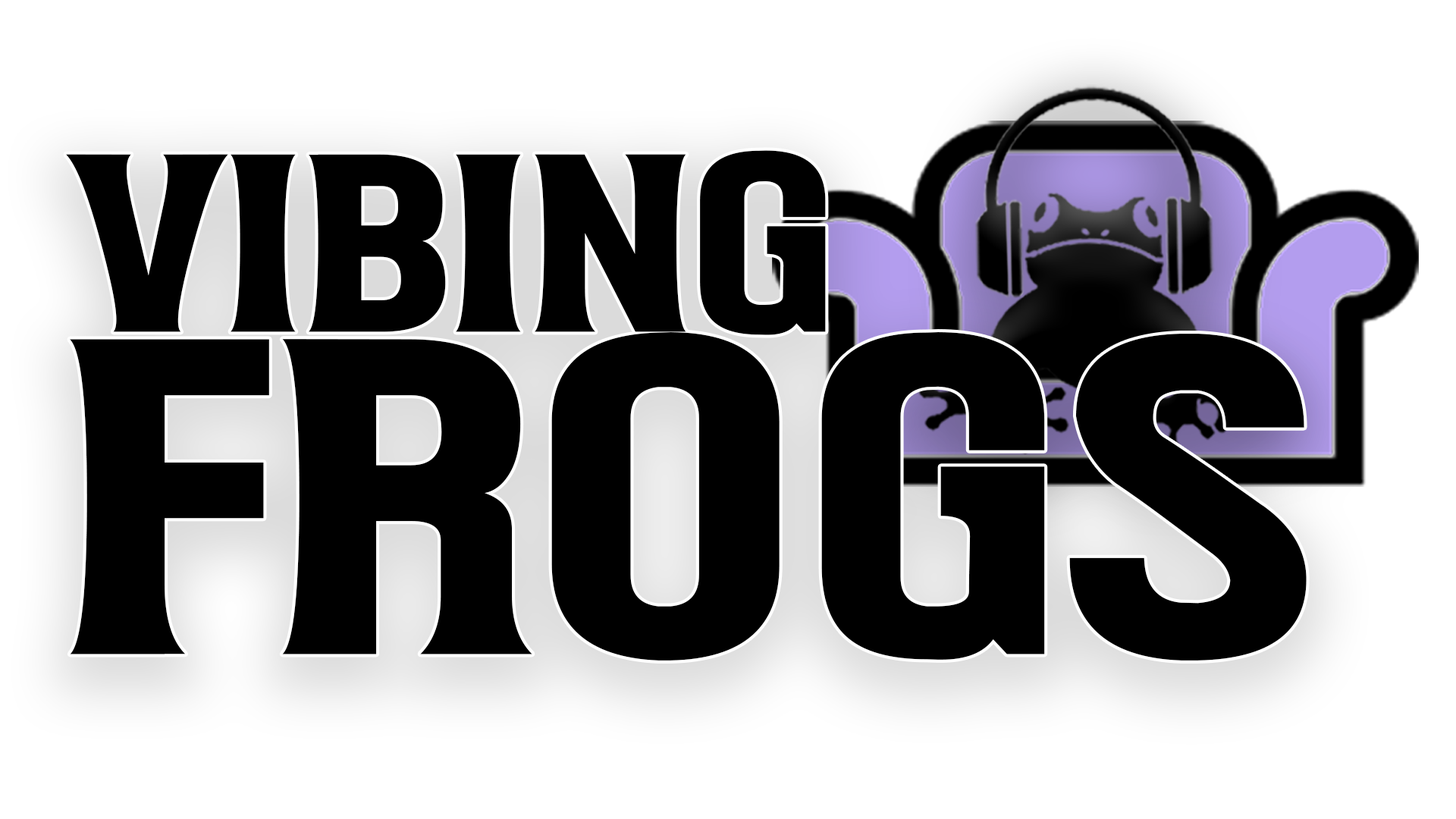
<style>
.page{position:relative;width:1456px;height:819px;background:#ffffff}
.page>*{position:absolute;margin:0}
.t1{font:221px/321.2px "MagicHat";color:#000000}
.t2{font:392.6px/321.2px "MagicHat";color:#000000}
</style>
<div class="page">
<p class="t1" style="left:66px;top:150px;width:1241px;height:510px">Vibing<br><span class="t2">Frogs</span></p>
</div>
